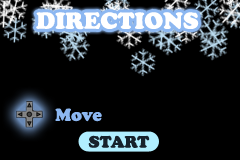
<style>
.page{position:relative;width:240px;height:160px;background:#000000}
.page>*{position:absolute;margin:0}
.t1{font:24px "CooperBlack";color:#ffffff}
.t2{font:18px "CooperBlack";color:#8cb7f1}
</style>
<div class="page">
<p class="t1" style="left:36px;top:12px;width:163px;height:18px">DIRECTIONS</p>
<p class="t2" style="left:55px;top:108px;width:47px;height:14px">Move</p>
</div>
